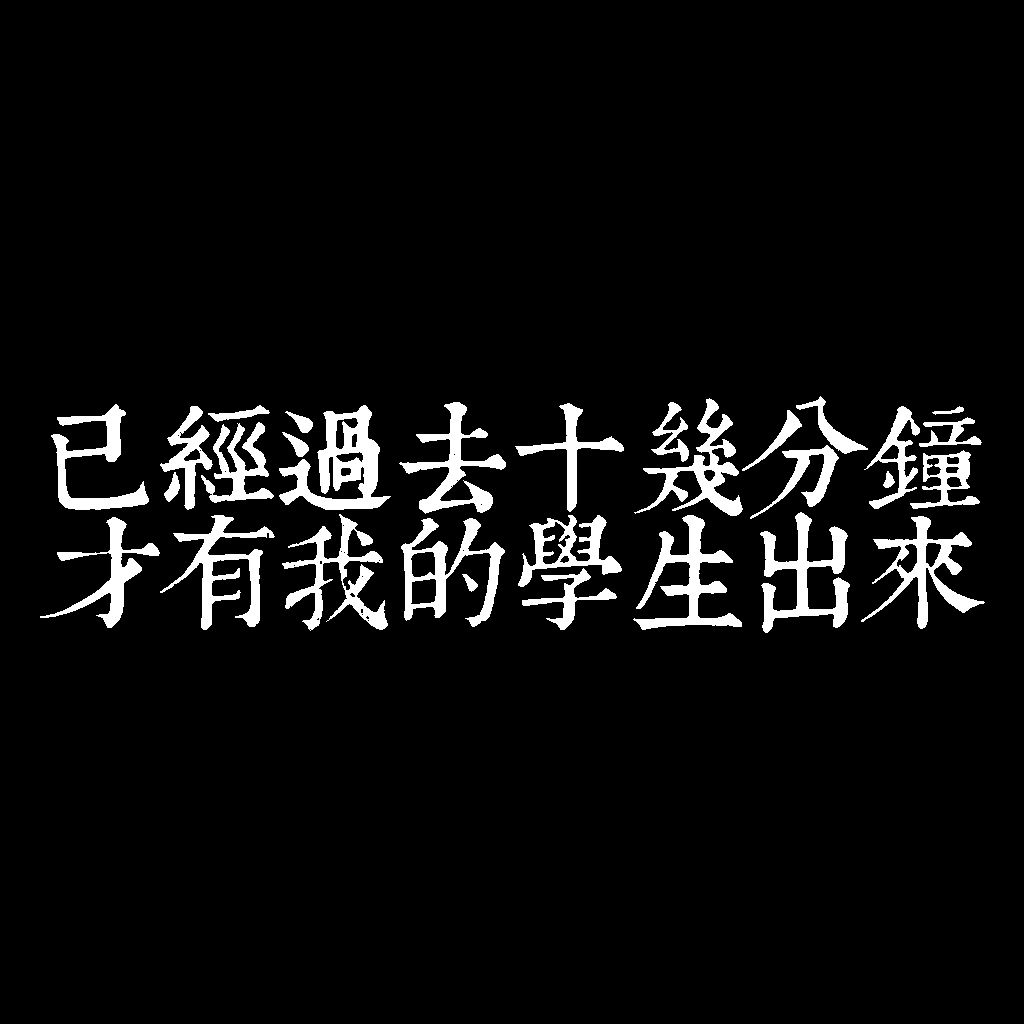
<style>
.page{position:relative;width:1024px;height:1024px;background:#000000}
.page>*{position:absolute;margin:0}
.t1{font:120px/115px "TpldKhangXiDictTrial";letter-spacing:-0.02em;color:#ffffff}
</style>
<div class="page">
<p class="t1" style="left:40px;top:396px;width:945px;height:237px">已經過去十幾分鐘<br>才有我的學生出來</p>
</div>
